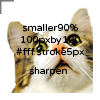
<style>
.page{position:relative;width:100px;height:100px;background:#ffffff}
.page>*{position:absolute;margin:0}
.t1{font:10px "VarelaRound";color:#000000}
</style>
<div class="page">
<p class="t1" style="left:16px;top:23px;width:68px;height:53px;text-align:center">smaller90%<br>100pxby100<br>#fff stroke5px<br>sharpen</p>
</div>
